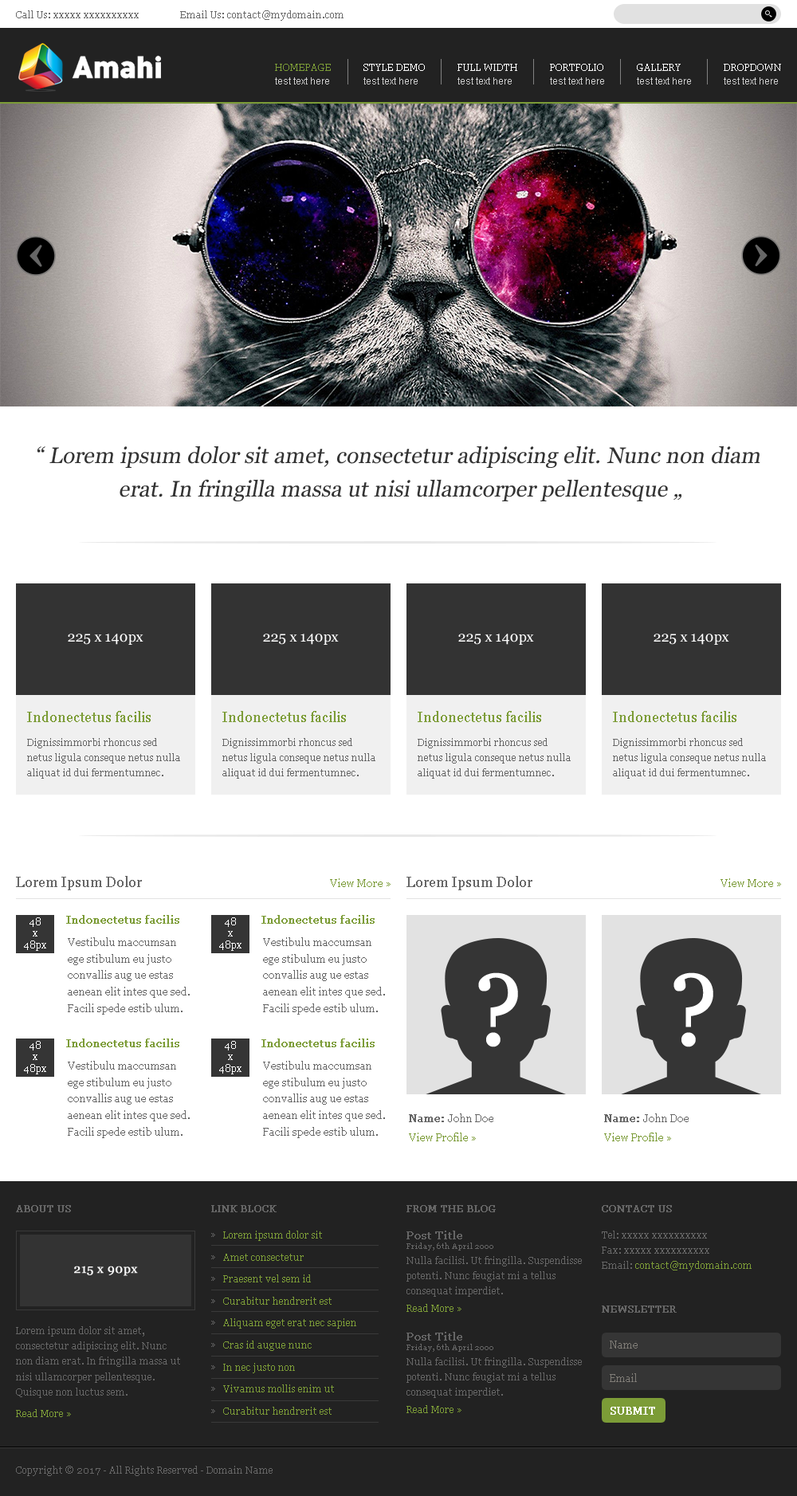
<style>
.page{position:relative;width:797px;height:1496px;background:#ffffff}
.page>*{position:absolute;margin:0}
.t1{font:9.6px "Georgia";color:#696969}
.t2{font:9.6px "Georgia";color:#7c9c37}
.t3{font:9.6px "Georgia";color:#ffffff}
.t4{font:9.6px "ArialMT";color:#cccccc}
.t5{font:22.3px/33.5px "Georgia";color:#333333;font-style:italic}
.t6{font:22.3px/22.3px "Georgia";color:#333333;font-style:italic}
.t7{font:14.3px "Georgia";color:#ffffff}
.t8{font:14.3px "Georgia";color:#7c9c37}
.t9{font:9.6px/15.3px "Georgia";color:#666666}
.t10{font:14.3px "Georgia";color:#666666}
.t11{font:10.4px "Georgia";color:#7b9b37}
.t12{font:9.6px/11.5px "Georgia";color:#ffffff}
.t13{font:11.2px "Georgia";color:#7c9c37;font-weight:bold}
.t14{font:10.4px/16.6px "Georgia";color:#666666}
.t15{font:101.9px "Georgia";color:#ffffff;font-weight:bold}
.t16{font:10.4px "Georgia";color:#666666}
.t17{font:10.4px "Georgia";color:#666666;font-weight:bold}
.t18{font:9.6px "Georgia";color:#666666;font-weight:bold}
.t19{font:9.6px/22px "Georgia";color:#666666}
.t20{font:9.6px/22px "Georgia";color:#7c9c37}
.t21{font:11.2px/13.4px "Georgia";color:#666666;font-weight:bold}
.t22{font:8px/9.6px "Georgia";color:#666666}
.t23{font:9.6px/15.3px "Georgia";color:#7c9c37}
.t24{font:12.4px "Georgia";color:#f8f8f8;font-weight:bold}
.t25{font:10.4px "Georgia";color:#807d77}
.t26{font:10.4px "Georgia";color:#ffffff;font-weight:bold}
.t27{font:9.6px "Georgia";color:#666666}
</style>
<div class="page">
<p class="t1" style="left:16px;top:10px;width:328px;height:11px">Call Us: xxxxx xxxxxxxxxx                 Email Us: contact@mydomain.com</p>
<p class="t2" style="left:275px;top:64px;width:56px;height:7px">HOMEPAGE</p>
<p class="t3" style="left:363px;top:64px;width:62px;height:7px">STYLE DEMO</p>
<p class="t3" style="left:458px;top:64px;width:59px;height:7px">FULL WIDTH</p>
<p class="t3" style="left:550px;top:64px;width:53px;height:7px">PORTFOLIO</p>
<p class="t3" style="left:637px;top:64px;width:44px;height:7px">GALLERY</p>
<p class="t3" style="left:724px;top:64px;width:57px;height:7px">DROPDOWN</p>
<p class="t4" style="left:275px;top:77px;width:54px;height:7px">test text here</p>
<p class="t4" style="left:363px;top:77px;width:55px;height:7px">test text here</p>
<p class="t4" style="left:458px;top:77px;width:54px;height:7px">test text here</p>
<p class="t4" style="left:550px;top:77px;width:54px;height:7px">test text here</p>
<p class="t4" style="left:637px;top:77px;width:54px;height:7px">test text here</p>
<p class="t4" style="left:724px;top:77px;width:54px;height:7px">test text here</p>
<p class="t5" style="left:37px;top:446px;width:723px;height:55px;text-align:center"><span class="t6">“</span> Lorem ipsum dolor sit amet, consectetur adipiscing elit. Nunc non diam <br>erat. In fringilla massa ut nisi ullamcorper pellentesque „</p>
<p class="t7" style="left:68px;top:634px;width:75px;height:11px">225 x 140px</p>
<p class="t7" style="left:263px;top:634px;width:76px;height:11px">225 x 140px</p>
<p class="t7" style="left:458px;top:634px;width:76px;height:11px">225 x 140px</p>
<p class="t7" style="left:654px;top:634px;width:75px;height:11px">225 x 140px</p>
<p class="t8" style="left:27px;top:711px;width:124px;height:11px">Indonectetus facilis</p>
<p class="t8" style="left:222px;top:711px;width:124px;height:11px">Indonectetus facilis</p>
<p class="t8" style="left:418px;top:711px;width:123px;height:11px">Indonectetus facilis</p>
<p class="t8" style="left:613px;top:711px;width:123px;height:11px">Indonectetus facilis</p>
<p class="t9" style="left:27px;top:738px;width:153px;height:41px">Dignissimmorbi rhoncus sed netus ligula conseque netus nulla aliquat id dui fermentumnec.</p>
<p class="t9" style="left:222px;top:738px;width:153px;height:41px">Dignissimmorbi rhoncus sed netus ligula conseque netus nulla aliquat id dui fermentumnec.</p>
<p class="t9" style="left:418px;top:738px;width:153px;height:41px">Dignissimmorbi rhoncus sed netus ligula conseque netus nulla aliquat id dui fermentumnec.</p>
<p class="t9" style="left:613px;top:738px;width:153px;height:41px">Dignissimmorbi rhoncus sed netus ligula conseque netus nulla aliquat id dui fermentumnec.</p>
<p class="t10" style="left:16px;top:876px;width:126px;height:14px">Lorem Ipsum Dolor</p>
<p class="t11" style="left:330px;top:878px;width:61px;height:9px">View More »</p>
<p class="t10" style="left:406px;top:876px;width:126px;height:14px">Lorem Ipsum Dolor</p>
<p class="t11" style="left:721px;top:878px;width:60px;height:9px">View More »</p>
<p class="t12" style="left:24px;top:917px;width:22px;height:34px;text-align:center">48<br>x<br>48px</p>
<p class="t13" style="left:66px;top:915px;width:113px;height:9px">Indonectetus facilis</p>
<p class="t12" style="left:219px;top:917px;width:23px;height:34px;text-align:center">48<br>x<br>48px</p>
<p class="t13" style="left:261px;top:915px;width:114px;height:9px">Indonectetus facilis</p>
<p class="t14" style="left:68px;top:937px;width:122px;height:78px">Vestibulu maccumsan ege stibulum eu justo convallis aug ue estas aenean elit intes que sed. Facili spede estib ulum.</p>
<p class="t14" style="left:263px;top:937px;width:122px;height:78px">Vestibulu maccumsan ege stibulum eu justo convallis aug ue estas aenean elit intes que sed. Facili spede estib ulum.</p>
<p class="t15" style="left:478px;top:972px;width:40px;height:75px">?</p>
<p class="t15" style="left:674px;top:972px;width:39px;height:75px">?</p>
<p class="t12" style="left:24px;top:1041px;width:22px;height:33px;text-align:center">48<br>x<br>48px</p>
<p class="t13" style="left:66px;top:1039px;width:113px;height:8px">Indonectetus facilis</p>
<p class="t12" style="left:219px;top:1041px;width:23px;height:33px;text-align:center">48<br>x<br>48px</p>
<p class="t13" style="left:261px;top:1039px;width:114px;height:8px">Indonectetus facilis</p>
<p class="t14" style="left:68px;top:1061px;width:122px;height:77px">Vestibulu maccumsan ege stibulum eu justo convallis aug ue estas aenean elit intes que sed. Facili spede estib ulum.</p>
<p class="t14" style="left:263px;top:1061px;width:122px;height:77px">Vestibulu maccumsan ege stibulum eu justo convallis aug ue estas aenean elit intes que sed. Facili spede estib ulum.</p>
<p class="t16" style="left:409px;top:1113px;width:84px;height:9px"><span class="t17">Name: </span>John Doe</p>
<p class="t16" style="left:604px;top:1113px;width:85px;height:9px"><span class="t17">Name: </span>John Doe</p>
<p class="t11" style="left:409px;top:1133px;width:67px;height:8px">View Profile »</p>
<p class="t11" style="left:604px;top:1133px;width:67px;height:8px">View Profile »</p>
<p class="t18" style="left:16px;top:1205px;width:55px;height:7px">ABOUT US</p>
<p class="t18" style="left:211px;top:1205px;width:66px;height:7px">LINK BLOCK</p>
<p class="t18" style="left:406px;top:1205px;width:90px;height:7px">FROM THE BLOG</p>
<p class="t18" style="left:602px;top:1205px;width:70px;height:7px">CONTACT US</p>
<p class="t19" style="left:211px;top:1233px;width:4px;height:180px">»<br>»<br>»<br>»<br>»<br>»<br>»<br>»<br>»</p>
<p class="t20" style="left:223px;top:1231px;width:133px;height:184px">Lorem ipsum dolor sit<br>Amet consectetur<br>Praesent vel sem id<br>Curabitur hendrerit est<br>Aliquam eget erat nec sapien<br>Cras id augue nunc<br>In nec justo non<br>Vivamus mollis enim ut<br>Curabitur hendrerit est</p>
<p class="t9" style="left:406px;top:1231px;width:176px;height:66px"><span class="t21">Post Title<br></span><span class="t22">Friday, 6th April 2000<br></span>Nulla facilisi. Ut fringilla. Suspendisse potenti. Nunc feugiat mi a tellus consequat imperdiet.</p>
<p class="t9" style="left:602px;top:1231px;width:150px;height:40px">Tel: xxxxx xxxxxxxxxx<br>Fax: xxxxx xxxxxxxxxx<br>Email: <span class="t23">contact@mydomain.com</span></p>
<p class="t24" style="left:74px;top:1266px;width:64px;height:10px">215 x 90px</p>
<p class="t2" style="left:406px;top:1304px;width:55px;height:8px">Read More »</p>
<p class="t18" style="left:602px;top:1306px;width:75px;height:7px">NEWSLETTER</p>
<p class="t9" style="left:16px;top:1326px;width:164px;height:72px">Lorem ipsum dolor sit amet, consectetur adipiscing elit. Nunc non diam erat. In fringilla massa ut nisi ullamcorper pellentesque. Quisque non luctus sem.</p>
<p class="t9" style="left:406px;top:1332px;width:176px;height:66px"><span class="t21">Post Title<br></span><span class="t22">Friday, 6th April 2000<br></span>Nulla facilisi. Ut fringilla. Suspendisse potenti. Nunc feugiat mi a tellus consequat imperdiet.</p>
<p class="t25" style="left:610px;top:1341px;width:28px;height:8px">Name</p>
<p class="t25" style="left:610px;top:1373px;width:27px;height:9px">Email</p>
<p class="t2" style="left:16px;top:1409px;width:55px;height:8px">Read More »</p>
<p class="t2" style="left:406px;top:1405px;width:55px;height:8px">Read More »</p>
<p class="t26" style="left:611px;top:1407px;width:44px;height:8px">SUBMIT</p>
<p class="t27" style="left:16px;top:1466px;width:257px;height:10px">Copyright © 2017 - All Rights Reserved - Domain Name</p>
</div>
